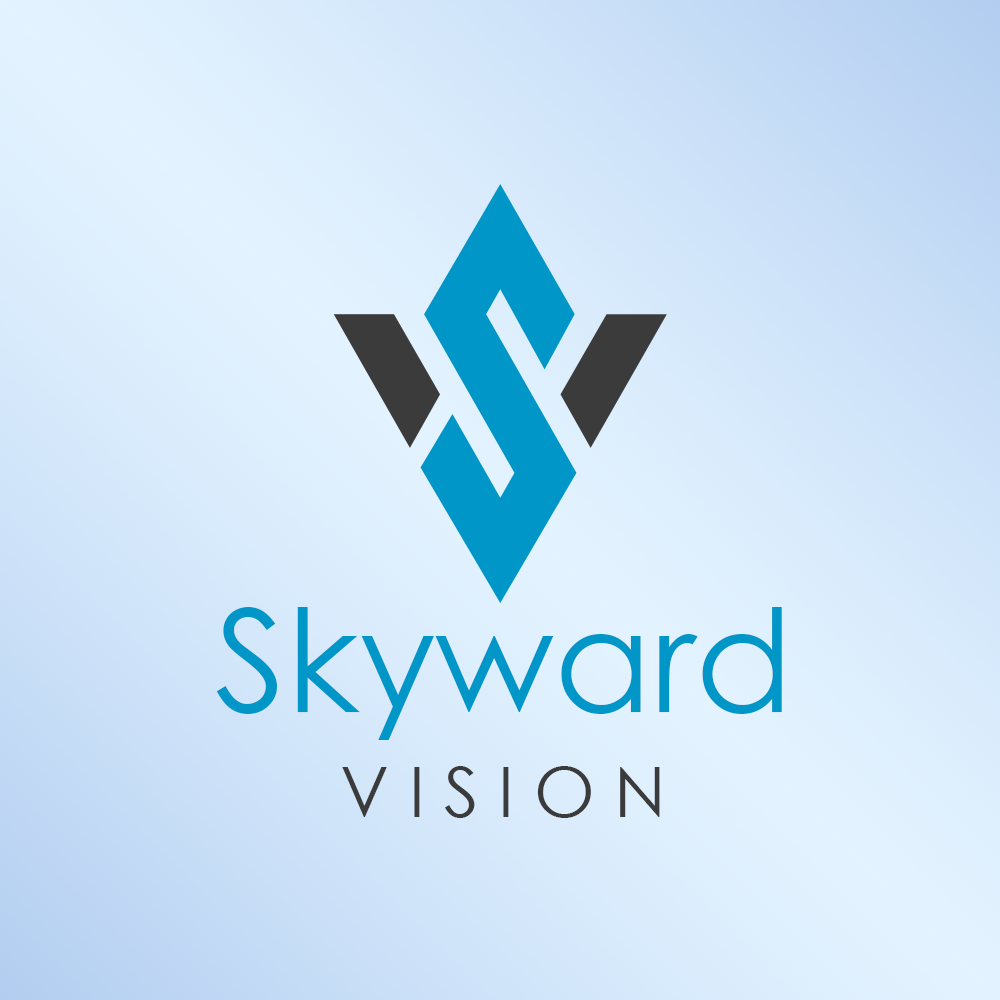
<style>
.page{position:relative;width:1000px;height:1000px}
.page>*{position:absolute;margin:0}
.t1{font:143.1px "CenturyGothic";color:#0096c7}
.t2{font:69.2px "CenturyGothic";letter-spacing:0.28em;color:#3b3b3b;text-transform:uppercase}
</style>
<div class="page">
<p class="t1" style="left:216px;top:607px;width:566px;height:133px">Skyward</p>
<p class="t2" style="left:342px;top:766px;width:318px;height:52px">Vision</p>
</div>
